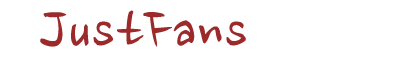
<style>
.page{position:relative;width:400px;height:58px;background:#ffffff}
.page>*{position:absolute;margin:0}
.t1{font:62.5px "NanumBrush";letter-spacing:0.01em;color:#9d2a2a;font-weight:bold}
</style>
<div class="page">
<p class="t1" style="left:40px;top:10px;width:206px;height:37px">JustFans</p>
</div>
